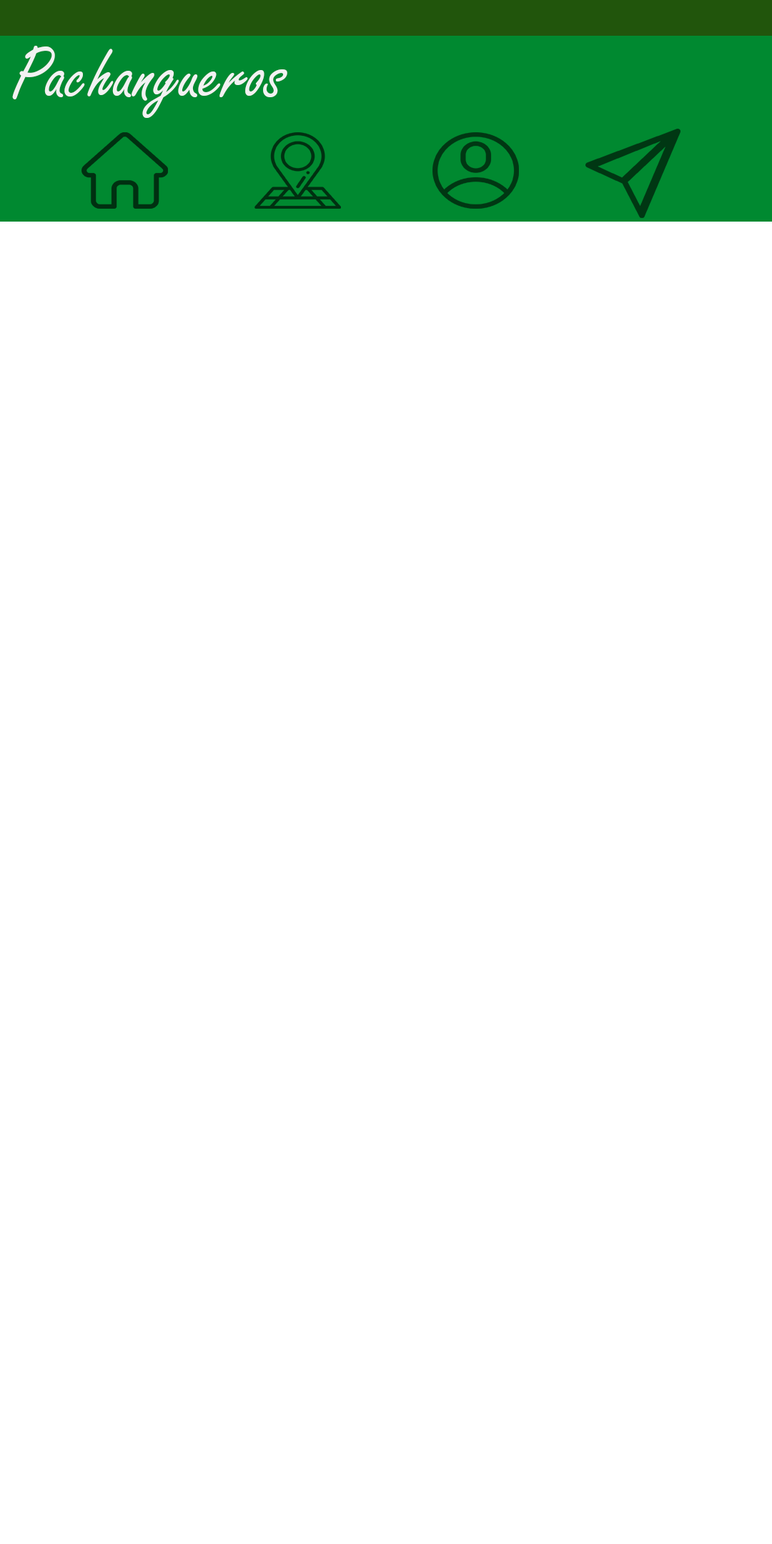
<style>
.page{position:relative;width:772px;height:1544px;background:#ffffff}
.page>*{position:absolute;margin:0}
.t1{font:80px "FreestyleScript-Regular";color:#f2f2f2}
</style>
<div class="page">
<p class="t1" style="left:12px;top:46px;width:275px;height:72px">Pachangueros</p>
</div>
